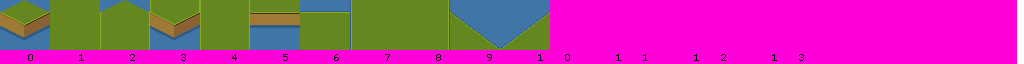
<style>
.page{position:relative;width:1024px;height:64px;background:#ff00d8}
.page>*{position:absolute;margin:0}
.t1{font:10px "Verdana";letter-spacing:2em;color:#000000}
</style>
<div class="page">
<p class="t1" style="left:28px;top:54px;width:776px;height:7px">0 1 2 3 4 5 6 7 8 9 10 11 12 13</p>
</div>
